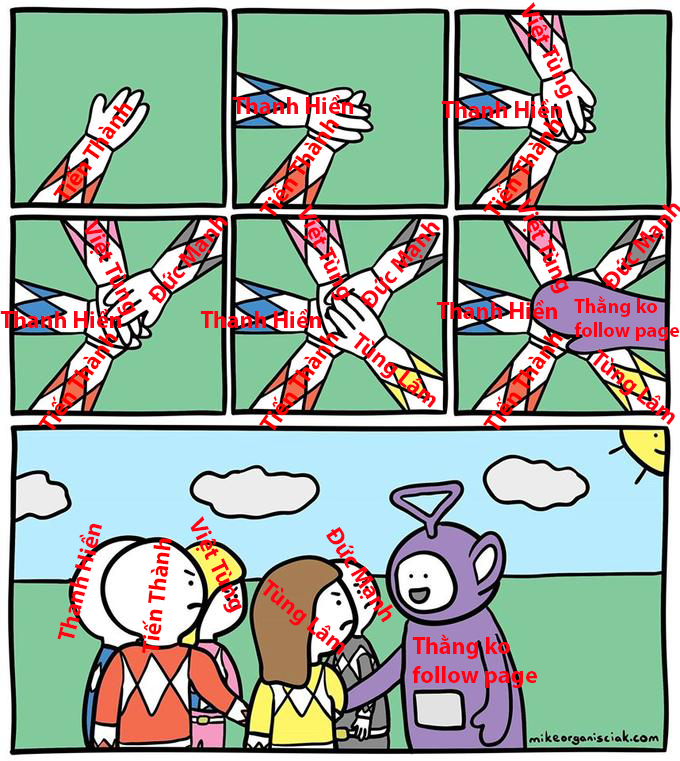
<style>
.page{position:relative;width:680px;height:761px}
.page>*{position:absolute;margin:0}
.t1{font:24px "MyriadPro-Bold";color:#ff0214}
.t2{font:24px "MyriadPro-Bold";color:#ff0000}
.t3{font:20.3px "MyriadPro-Bold";color:#ff0214}
</style>
<div class="page">
<p class="t1" style="left:521px;top:2px;width:52px;height:97px;rotate:64deg">Việt Tùng</p>
<p class="t1" style="left:232px;top:95px;width:121px;height:19px">Thanh Hiền</p>
<p class="t1" style="left:441px;top:99px;width:121px;height:19px">Thanh Hiền</p>
<p class="t2" style="left:53px;top:103px;width:81px;height:98px;rotate:-55deg">Tiến Thành</p>
<p class="t2" style="left:259px;top:119px;width:81px;height:98px;rotate:-55deg">Tiến Thành</p>
<p class="t2" style="left:483px;top:119px;width:81px;height:98px;rotate:-55deg">Tiến Thành</p>
<p class="t1" style="left:517px;top:197px;width:52px;height:97px;rotate:64deg">Việt Tùng</p>
<p class="t1" style="left:298px;top:204px;width:52px;height:97px;rotate:64deg">Việt Tùng</p>
<p class="t1" style="left:84px;top:219px;width:52px;height:97px;rotate:64deg">Việt Tùng</p>
<p class="t1" style="left:148px;top:217px;width:81px;height:87px;rotate:-49deg">Đức Mạnh</p>
<p class="t1" style="left:360px;top:222px;width:81px;height:87px;rotate:-49deg">Đức Mạnh</p>
<p class="t1" style="left:436px;top:300px;width:121px;height:19px">Thanh Hiền</p>
<p class="t3" style="left:574px;top:296px;width:105px;height:45px">Thằng ko<br>follow page</p>
<p class="t1" style="left:0px;top:309px;width:121px;height:19px">Thanh Hiền</p>
<p class="t1" style="left:200px;top:309px;width:121px;height:19px">Thanh Hiền</p>
<p class="t2" style="left:38px;top:333px;width:81px;height:98px;rotate:-55deg">Tiến Thành</p>
<p class="t2" style="left:259px;top:333px;width:81px;height:98px;rotate:-55deg">Tiến Thành</p>
<p class="t1" style="left:353px;top:331px;width:83px;height:77px;rotate:39deg">Tùng Lâm</p>
<p class="t2" style="left:483px;top:333px;width:81px;height:98px;rotate:-55deg">Tiến Thành</p>
<p class="t1" style="left:592px;top:348px;width:83px;height:77px;rotate:39deg">Tùng Lâm</p>
<p class="t1" style="left:190px;top:516px;width:52px;height:97px;rotate:64deg">Việt Tùng</p>
<p class="t1" style="left:57px;top:523px;width:45px;height:117px;rotate:-76deg">Thanh Hiền</p>
<p class="t1" style="left:326px;top:526px;width:67px;height:97px;rotate:57deg">Đức Mạnh</p>
<p class="t2" style="left:142px;top:538px;width:30px;height:115px;rotate:-83deg">Tiến Thành</p>
<p class="t1" style="left:262px;top:578px;width:83px;height:77px;rotate:39deg">Tùng Lâm</p>
<p class="t1" style="left:412px;top:634px;width:125px;height:54px">Thằng ko<br>follow page</p>
</div>
